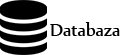
<style>
.page{position:relative;width:125px;height:55px;background:#ffffff}
.page>*{position:absolute;margin:0}
.t1{font:20.8px "Nyala-Regular";color:#020000}
</style>
<div class="page">
<p class="t1" style="left:50px;top:22px;width:70px;height:14px">Databaza</p>
</div>
